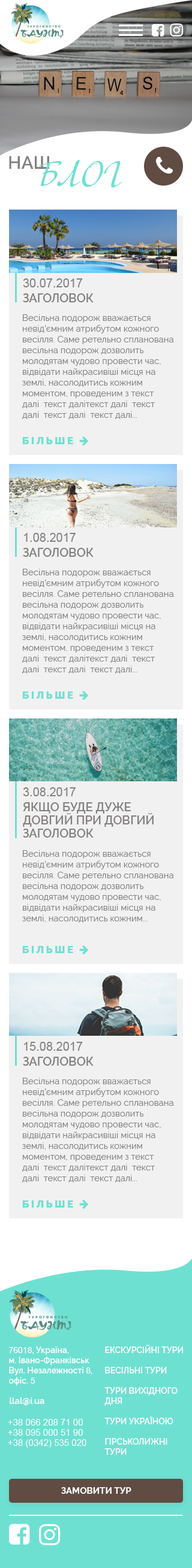
<style>
.page{position:relative;width:192px;height:1568px;background:#f1f1f1}
.page>*{position:absolute;margin:0}
.t1{font:18px "Raleway-SemiBold";color:#82807f}
.t2{font:35.9px "Adventure";color:#6ee0d2}
.t3{font:12px "ArialMT";color:#82807f}
.t4{font:12px "Raleway-SemiBold";color:#82807f}
.t5{font:9px "Raleway-Regular";color:#82807f}
.t6{font:9px "Raleway-Regular";color:#5a5959}
.t7{font:12px/13.2px "Raleway-SemiBold";color:#82807f}
.t8{font:8.4px/10.2px "Raleway-SemiBold";color:#ffffff}
.t9{font:8.4px/10.2px "ArialMT";color:#ffffff}
.t10{font:12px/13.2px "Raleway-Bold";color:#ffffff}
.t11{font:9px "Raleway-SemiBold";color:#ffffff}
.t12{font:9px/10.2px "ArialMT";color:#ffffff}
.t13{font:9px "Raleway-Bold";color:#ffffff}
</style>
<div class="page">
<p class="t1" style="left:9px;top:156px;width:40px;height:13px">НАШ</p>
<p class="t2" style="left:39px;top:160px;width:83px;height:27px">БЛОГ</p>
<p class="t3" style="left:23px;top:278px;width:60px;height:9px">30.07.2017</p>
<p class="t4" style="left:23px;top:293px;width:70px;height:9px">ЗАГОЛОВОК</p>
<p class="t5" style="left:22px;top:314px;width:152px;height:105px"><span class="t6"><br><br></span>Весільна подорож вважається <br>невід’ємним атрибутом кожного <br>весілля. Саме ретельно спланована <br>весільна подорож дозволить <br>молодятам чудово провести час, <br>відвідати найкрасивіші місця на <br>землі, насолодитись кожним <br>моментом, проведеним з текст <br>далі  текст далітекст далі  текст <br>далі  текст далі  текст далі...</p>
<p class="t3" style="left:24px;top:533px;width:51px;height:9px">1.08.2017</p>
<p class="t4" style="left:23px;top:548px;width:70px;height:9px">ЗАГОЛОВОК</p>
<p class="t5" style="left:22px;top:569px;width:152px;height:105px"><span class="t6"><br><br></span>Весільна подорож вважається <br>невід’ємним атрибутом кожного <br>весілля. Саме ретельно спланована <br>весільна подорож дозволить <br>молодятам чудово провести час, <br>відвідати найкрасивіші місця на <br>землі, насолодитись кожним <br>моментом, проведеним з текст <br>далі  текст далітекст далі  текст <br>далі  текст далі  текст далі...</p>
<p class="t3" style="left:23px;top:787px;width:52px;height:9px">3.08.2017</p>
<p class="t7" style="left:23px;top:802px;width:130px;height:36px">ЯКЩО БУДЕ ДУЖЕ <br>ДОВГИЙ ПРИ ДОВГИЙ<br>ЗАГОЛОВОК</p>
<p class="t5" style="left:22px;top:850px;width:152px;height:73px"><span class="t6"><br><br></span>Весільна подорож вважається <br>невід’ємним атрибутом кожного <br>весілля. Саме ретельно спланована <br>весільна подорож дозволить <br>молодятам чудово провести час, <br>відвідати найкрасивіші місця на <br>землі, насолодитись кожним...</p>
<p class="t3" style="left:24px;top:1042px;width:59px;height:9px">15.08.2017</p>
<p class="t4" style="left:23px;top:1057px;width:70px;height:9px">ЗАГОЛОВОК</p>
<p class="t5" style="left:22px;top:1078px;width:152px;height:104px"><span class="t6"><br><br></span>Весільна подорож вважається <br>невід’ємним атрибутом кожного <br>весілля. Саме ретельно спланована <br>весільна подорож дозволить <br>молодятам чудово провести час, <br>відвідати найкрасивіші місця на <br>землі, насолодитись кожним <br>моментом, проведеним з текст <br>далі  текст далітекст далі  текст <br>далі  текст далі  текст далі...</p>
<p class="t8" style="left:8px;top:1346px;width:84px;height:39px"><span class="t9">76018</span>, Україна, <br>м. Івано-Франківськ<br>Вул. Незалежності <span class="t9">8</span>, <br>офіс.<span class="t9"> 5</span></p>
<p class="t8" style="left:104px;top:1345px;width:79px;height:110px"><span class="t10"><br><br><br></span>ЕКСКУРСІЙНІ ТУРИ<br><br>ВЕСІЛЬНІ ТУРИ<br><br>ТУРИ ВИХІДНОГО <br>ДНЯ<br><br>ТУРИ УКРАЇНОЮ<br><br>ГІРСЬКОЛИЖНІ <br>ТУРИ</p>
<p class="t11" style="left:10px;top:1397px;width:34px;height:9px">llal@i.ua</p>
<p class="t12" style="left:8px;top:1419px;width:78px;height:29px">+38 066 208 71 00<br>+38 095 000 51 90<br>+38 (0342) 535 020</p>
<p class="t13" style="left:61px;top:1487px;width:70px;height:7px">ЗАМОВИТИ ТУР</p>
</div>
